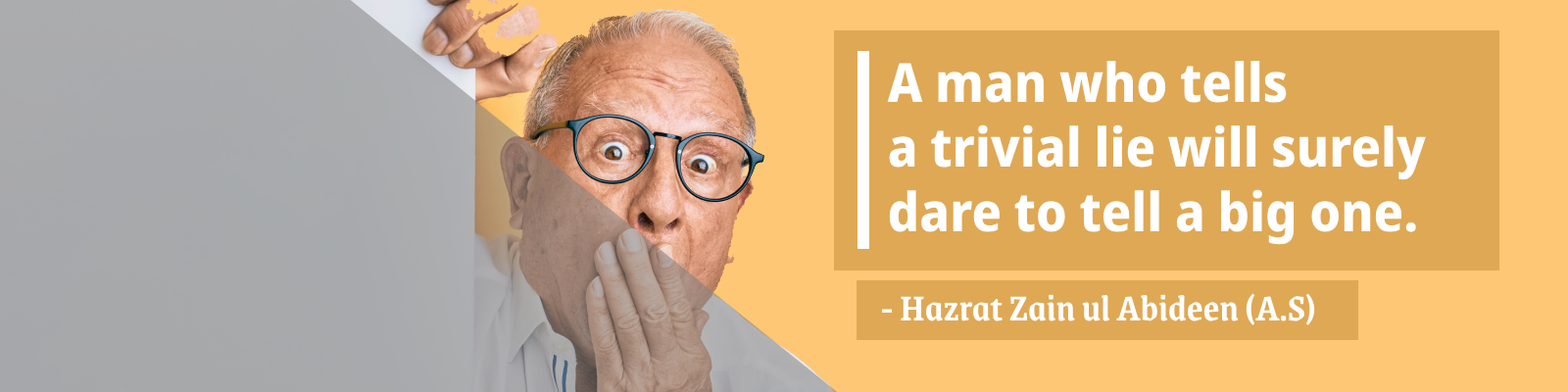
<style>
.page{position:relative;width:1568px;height:392px;background:#dfa855}
.page>*{position:absolute;margin:0}
.t1{font:53.9px "NotoSans-SemiCondensedExtraBold";color:#ffffff}
.t2{font:39.2px "Grenze-SemiBold";color:#fec775}
.t3{font:39.2px "Grenze-SemiBold";color:#ffffff}
</style>
<div class="page">
<p class="t1" style="left:887px;top:61px;width:539px;height:184px">A man who tells <br>a trivial lie will surely <br>dare to tell a big one.</p>
<p class="t2" style="left:882px;top:293px;width:433px;height:32px"><span class="t3">- H</span>azrat Zain ul Abideen (A.S)</p>
</div>
